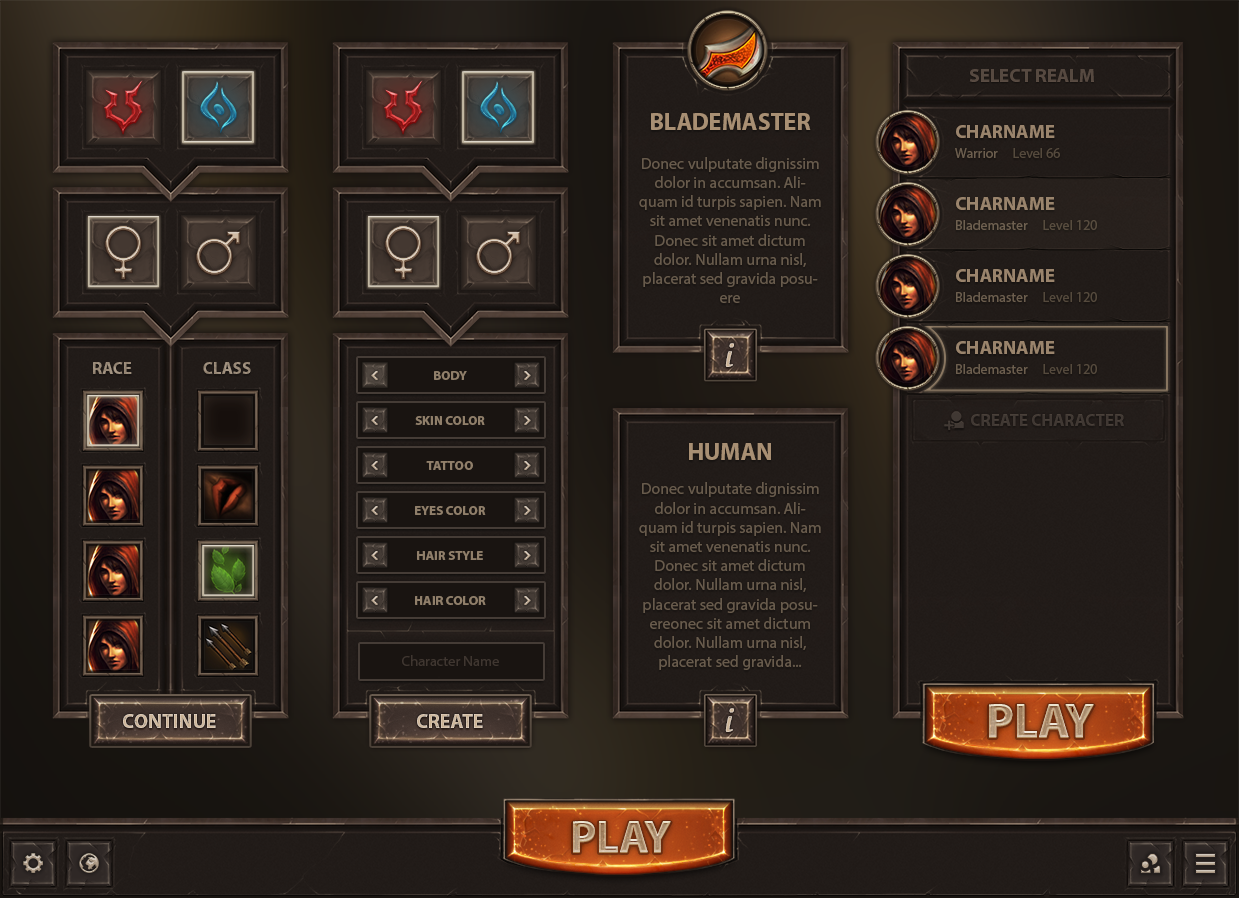
<style>
.page{position:relative;width:1239px;height:898px}
.page>*{position:absolute;margin:0}
.t1{font:19px "MyriadPro-Bold";color:#564940;text-transform:uppercase}
.t2{font:24px "MyriadPro-Bold";color:#a88f73;text-transform:uppercase}
.t3{font:19px "MyriadPro-Bold";color:#9a846c;text-transform:uppercase}
.t4{font:14px "MyriadPro-Regular";color:#554a3d}
.t5{font:14px "MyriadPro-Regular";color:#6c5e4e}
.t6{font:16px "MyriadPro-Regular";color:#685b4c}
.t7{font:42px "Gabriola";color:#cab294;font-weight:bold;font-style:italic}
.t8{font:17px "MyriadPro-Bold";color:#a18f7a;text-transform:uppercase}
.t9{font:13px "MyriadPro-Bold";color:#907f6a;text-transform:uppercase}
.t10{font:17px "MyriadPro-Bold";color:#3f3732;text-transform:uppercase}
.t11{font:14.5px "MyriadPro-Regular";color:#3f3630}
.t12{font:48px "MyriadPro-Bold";text-transform:uppercase}
.t13{font:20px "MyriadPro-Bold";color:#d2bda5;text-transform:uppercase}
.t14{font:20px "MyriadPro-Bold";color:#d2bda6;text-transform:uppercase}
.t15{font:45px "MyriadPro-Bold";text-transform:uppercase}
</style>
<div class="page">
<p class="t1" style="left:969px;top:69px;width:125px;height:13px">select realm</p>
<p class="t2" style="left:651px;top:113px;width:160px;height:17px">Blademaster</p>
<p class="t3" style="left:956px;top:125px;width:99px;height:13px">charname</p>
<p class="t4" style="left:955px;top:148px;width:105px;height:10px"><span class="t5">Warrior     </span>Level 66</p>
<p class="t6" style="left:639px;top:157px;width:182px;height:146px;text-align:center">Donec vulputate dignissim dolor in accumsan. Aliquam id turpis sapien. Nam sit amet venenatis nunc. Donec sit amet dictum dolor. Nullam urna nisl, placerat sed gravida posuere</p>
<p class="t3" style="left:956px;top:197px;width:99px;height:13px">charname</p>
<p class="t5" style="left:956px;top:220px;width:141px;height:10px">Blademaster     <span class="t4">Level 120</span></p>
<p class="t3" style="left:956px;top:269px;width:99px;height:13px">charname</p>
<p class="t5" style="left:956px;top:292px;width:141px;height:10px">Blademaster     <span class="t4">Level 120</span></p>
<p class="t3" style="left:956px;top:341px;width:99px;height:13px">charname</p>
<p class="t7" style="left:725px;top:343px;width:9px;height:24px">i</p>
<p class="t8" style="left:93px;top:362px;width:39px;height:12px">Race</p>
<p class="t8" style="left:203px;top:362px;width:48px;height:12px">class</p>
<p class="t5" style="left:956px;top:364px;width:141px;height:10px">Blademaster     <span class="t4">Level 120</span></p>
<p class="t9" style="left:434px;top:371px;width:33px;height:9px">body</p>
<p class="t10" style="left:971px;top:414px;width:153px;height:12px">create character</p>
<p class="t9" style="left:415px;top:416px;width:70px;height:9px">Skin Color</p>
<p class="t2" style="left:689px;top:443px;width:82px;height:17px">Human</p>
<p class="t9" style="left:426px;top:461px;width:47px;height:9px">tattoo</p>
<p class="t6" style="left:639px;top:482px;width:182px;height:188px;text-align:center">Donec vulputate dignissim dolor in accumsan. Aliquam id turpis sapien. Nam sit amet venenatis nunc. Donec sit amet dictum dolor. Nullam urna nisl, placerat sed gravida posuereonec sit amet dictum dolor. Nullam urna nisl, placerat sed gravida...</p>
<p class="t9" style="left:415px;top:506px;width:71px;height:9px">eyes color</p>
<p class="t9" style="left:417px;top:551px;width:66px;height:9px">hair style</p>
<p class="t9" style="left:415px;top:596px;width:71px;height:9px">hair color</p>
<p class="t11" style="left:402px;top:655px;width:97px;height:11px">Character Name</p>
<p class="t7" style="left:725px;top:708px;width:9px;height:24px">i</p>
<p class="t12" style="left:989px;top:705px;width:105px;height:33px">play</p>
<p class="t12" style="left:989px;top:704px;width:105px;height:33px">play</p>
<p class="t12" style="left:989px;top:704px;width:105px;height:33px">play</p>
<p class="t13" style="left:123px;top:714px;width:93px;height:14px">continue</p>
<p class="t14" style="left:417px;top:714px;width:66px;height:14px">create</p>
<p class="t15" style="left:573px;top:822px;width:98px;height:31px">play</p>
<p class="t15" style="left:573px;top:821px;width:98px;height:31px">play</p>
<p class="t15" style="left:573px;top:821px;width:98px;height:31px">play</p>
</div>
